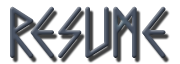
<style>
.page{position:relative;width:180px;height:64px;background:#ffffff}
.page>*{position:absolute;margin:0}
.t1{font:64px "ComicRunes";color:#4a5363}
</style>
<div class="page">
<p class="t1" style="left:10px;top:6px;width:156px;height:52px">RESUME</p>
</div>
